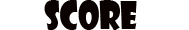
<style>
.page{position:relative;width:189px;height:30px;background:#ffffff}
.page>*{position:absolute;margin:0}
.t1{font:36.8px "ShowcardGothic-Reg";color:#090201;scale:0.83 1}
</style>
<div class="page">
<p class="t1" style="left:44px;top:0px;width:93px;height:31px">score</p>
</div>
